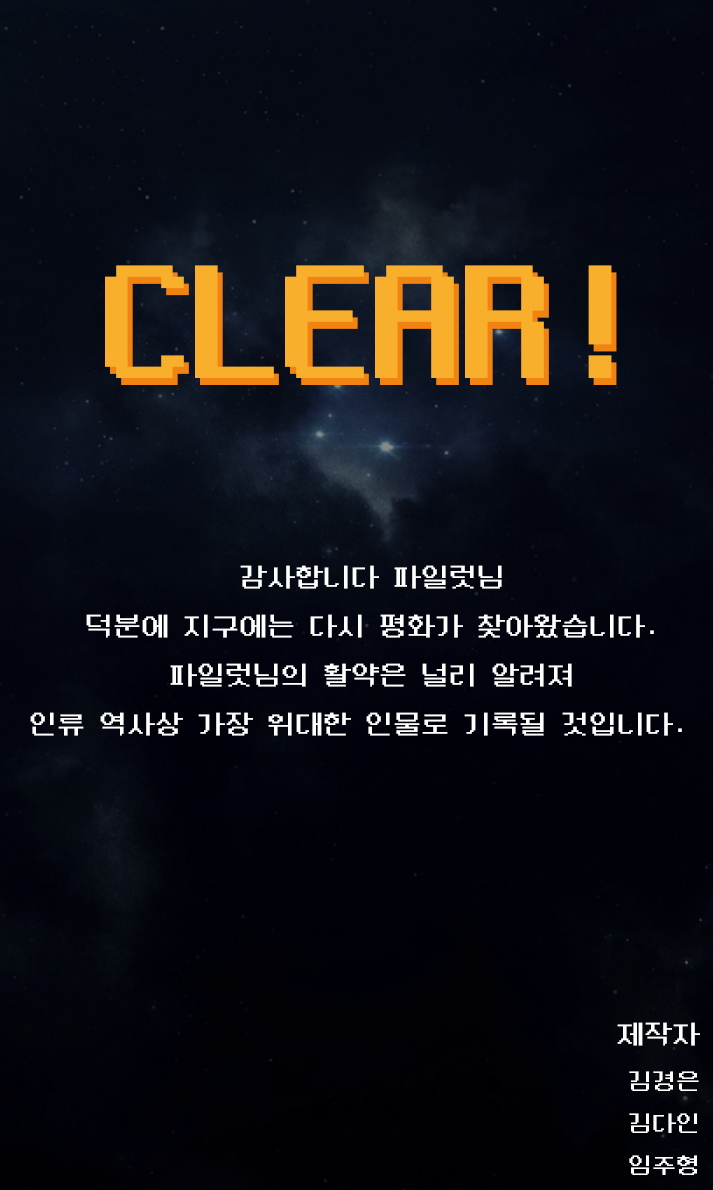
<style>
.page{position:relative;width:713px;height:1190px}
.page>*{position:absolute;margin:0}
.t1{font:180px "NeoDunggeunmo-Regular";color:#f8af2c}
.t2{font:180px "NeoDunggeunmo-Regular"}
.t3{font:28px "NeoDunggeunmo-Regular";color:#ffffff}
.t4{font:24px "NeoDunggeunmo-Regular";color:#ffffff}
</style>
<div class="page">
<p class="t1" style="left:105px;top:265px;width:507px;height:113px">CLEAR!</p>
<p class="t2" style="left:110px;top:272px;width:507px;height:113px">CLEAR!</p>
<p class="t3" style="left:30px;top:565px;width:652px;height:171px;text-align:center">감사합니다 파일럿님<br>덕분에 지구에는 다시 평화가 찾아왔습니다.<br>파일럿님의 활약은 널리 알려져<br>인류 역사상 가장 위대한 인물로 기록될 것입니다.</p>
<p class="t4" style="left:617px;top:1022px;width:83px;height:153px;text-align:right"><span class="t3">제작자<br></span>김경은<br>김다인<br>임주형</p>
</div>
